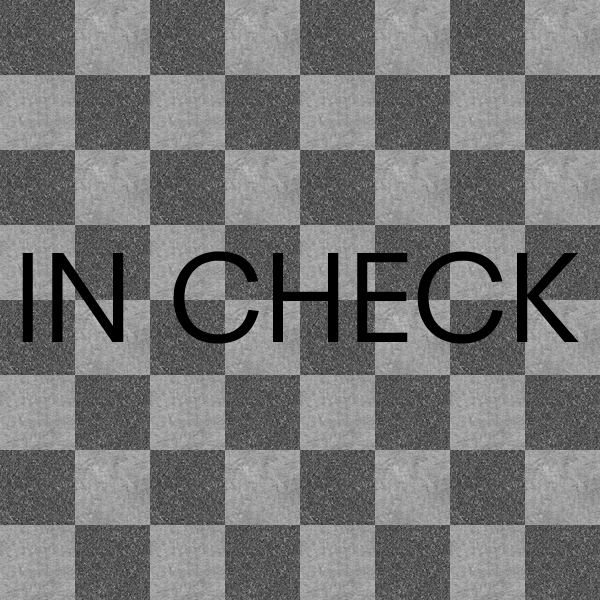
<style>
.page{position:relative;width:600px;height:600px}
.page>*{position:absolute;margin:0}
.t1{font:117.7px "NeuzeitSLTStd-Book";color:#000000}
</style>
<div class="page">
<p class="t1" style="left:22px;top:251px;width:557px;height:93px">IN CHECK</p>
</div>
